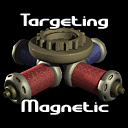
<style>
.page{position:relative;width:128px;height:128px;background:#000000}
.page>*{position:absolute;margin:0}
.t1{font:18px "GravitateBRK";color:#ffffff}
</style>
<div class="page">
<p class="t1" style="left:20px;top:13px;width:88px;height:16px">Targeting</p>
<p class="t1" style="left:21px;top:99px;width:88px;height:16px">Magnetic</p>
</div>
